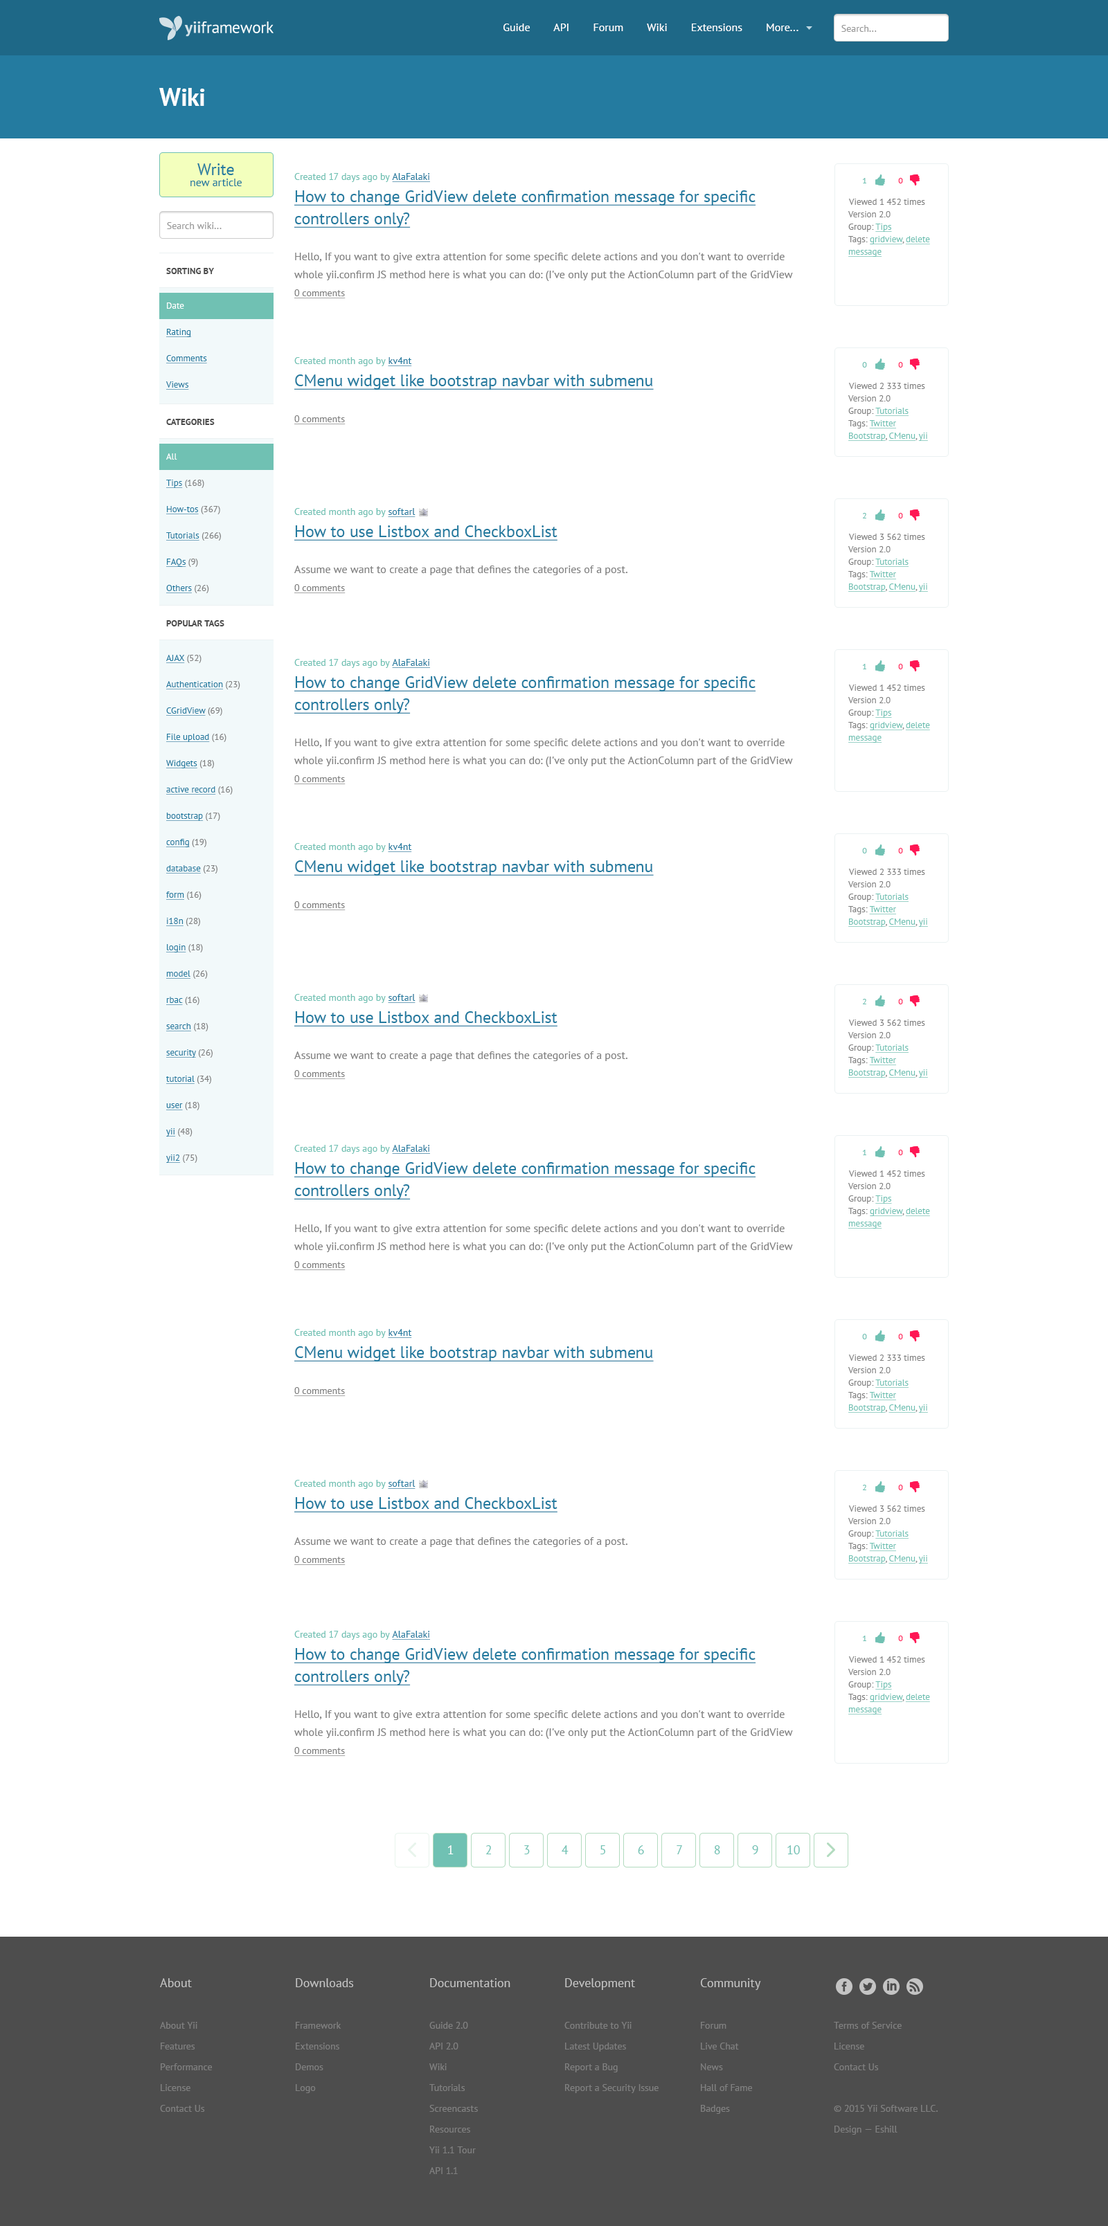
<style>
.page{position:relative;width:1108px;height:2226px;background:#ffffff}
.page>*{position:absolute;margin:0}
.t1{font:11.1px "PTSans-Regular";color:#ffffff}
.t2{font:9.7px "PTSans-Regular";color:#999999}
.t3{font:24.9px "PTSans-Bold";color:#ffffff}
.t4{font:11.1px/11.1px "PTSans-Regular";color:#247ba0}
.t5{font:16.6px/16.6px "PTSans-Regular";color:#247ba0}
.t6{font:11.1px/18px "PTSans-Regular";color:#808080}
.t7{font:9.7px/18px "PTSans-Regular";color:#70c1b3}
.t8{font:9.7px/18px "PTSans-Regular";color:#247ba0;text-decoration:underline}
.t9{font:16.6px/22.2px "PTSans-Regular";color:#247ba0;text-decoration:underline}
.t10{font:9.7px/18px "PTSans-Regular";color:#808080;text-decoration:underline}
.t11{font:8.3px "PTSans-Regular";color:#70c1b3}
.t12{font:8.3px "PTSans-Regular";color:#ff1654}
.t13{font:9px/12.5px "PTSans-Regular";color:#808080}
.t14{font:9px/12.5px "PTSans-Regular";color:#70c1b3;text-decoration:underline}
.t15{font:9px/26.3px "PTSans-Regular";color:#247ba0;text-decoration:underline}
.t16{font:9px/34.6px "PTSans-Bold";color:#4d4d4d;text-transform:uppercase}
.t17{font:9px/34.6px "PTSans-Regular";color:#ffffff}
.t18{font:9px/26.3px "PTSans-Regular";color:#808080}
.t19{font:9px/34.6px "PTSans-Regular";color:#247ba0;text-decoration:underline}
.t20{font:9px/34.6px "PTSans-Regular";color:#808080}
.t21{font:12.5px "PTSans-Regular";color:#ffffff}
.t22{font:12.5px "PTSans-Regular";color:#70c1b3}
.t23{font:9.7px/20.8px "PTSans-Regular";color:#808080}
.t24{font:12.5px/20.8px "PTSans-Regular";color:#c4c4c4}
</style>
<div class="page">
<p class="t1" style="left:503px;top:24px;width:295px;height:7px">Guide        API        Forum        Wiki        Extensions        More...</p>
<p class="t2" style="left:841px;top:25px;width:35px;height:7px">Search...</p>
<p class="t3" style="left:159px;top:88px;width:46px;height:18px">Wiki</p>
<p class="t4" style="left:190px;top:163px;width:52px;height:23px;text-align:center"><span class="t5">Write<br></span>new article</p>
<p class="t6" style="left:294px;top:173px;width:499px;height:125px"><span class="t7">Created 17 days ago by </span><span class="t8">AlaFalaki<br></span><span class="t9">How to change GridView delete confirmation message for specific controllers only?<br><br></span>Hello, If you want to give extra attention for some specific delete actions and you don't want to override whole yii.confirm JS method here is what you can do: (I've only put the ActionColumn part of the GridView<br><span class="t10">0 comments</span></p>
<p class="t11" style="left:863px;top:178px;width:3px;height:5px">1</p>
<p class="t12" style="left:898px;top:178px;width:5px;height:5px">0</p>
<p class="t13" style="left:847px;top:199px;width:83px;height:58px">Viewed 1 452 times <br>Version 2.0<br>Group: <span class="t14">Tips<br></span>Tags: <span class="t14">gridview</span>, <span class="t14">delete message</span></p>
<p class="t2" style="left:167px;top:222px;width:55px;height:7px">Search wiki...</p>
<p class="t15" style="left:165px;top:268px;width:49px;height:122px"><span class="t16">Sorting BY <br></span><span class="t17">Date<br></span>Rating<br>Comments<br>Views</p>
<p class="t9" style="left:294px;top:357px;width:360px;height:67px"><span class="t7">Created month ago by </span><span class="t8">kv4nt<br></span>CMenu widget like bootstrap navbar with submenu<br><br><span class="t10">0 comments</span></p>
<p class="t11" style="left:862px;top:362px;width:5px;height:6px">0</p>
<p class="t12" style="left:898px;top:362px;width:5px;height:6px">0</p>
<p class="t13" style="left:847px;top:383px;width:81px;height:58px">Viewed 2 333 times <br>Version 2.0<br>Group: <span class="t14">Tutorials<br></span>Tags: <span class="t14">Twitter Bootstrap</span>, <span class="t14">CMenu</span>, <span class="t14">yii</span></p>
<p class="t16" style="left:166px;top:419px;width:55px;height:174px">categories <br><span class="t17">All<br></span><span class="t15">Tips</span><span class="t18"> (168)<br></span><span class="t15">How-tos</span><span class="t18"> (367)<br></span><span class="t15">Tutorials</span><span class="t18"> (266)<br></span><span class="t15">FAQs</span><span class="t18"> (9)<br></span><span class="t15">Others</span><span class="t18"> (26)</span></p>
<p class="t6" style="left:294px;top:508px;width:333px;height:85px"><span class="t7">Created month ago by </span><span class="t8">softarl<br></span><span class="t9">How to use Listbox and CheckboxList<br><br></span>Assume we want to create a page that defines the categories of a post.<br><span class="t10">0 comments</span></p>
<p class="t11" style="left:862px;top:513px;width:4px;height:6px">2</p>
<p class="t12" style="left:898px;top:513px;width:5px;height:6px">0</p>
<p class="t13" style="left:847px;top:534px;width:81px;height:58px">Viewed 3 562 times <br>Version 2.0<br>Group: <span class="t14">Tutorials<br></span>Tags: <span class="t14">Twitter Bootstrap</span>, <span class="t14">CMenu</span>, <span class="t14">yii</span></p>
<p class="t15" style="left:166px;top:620px;width:74px;height:543px"><span class="t16">Popular Tags<br></span><span class="t19">AJAX</span><span class="t20"> (52)<br></span>Authentication<span class="t18"> (23)<br></span>CGridView<span class="t18"> (69)<br></span>File upload<span class="t18"> (16)<br></span>Widgets<span class="t18"> (18)<br></span>active record<span class="t18"> (16)<br></span>bootstrap<span class="t18"> (17)<br></span>config<span class="t18"> (19)<br></span>database<span class="t18"> (23)<br></span>form<span class="t18"> (16)<br></span>i18n<span class="t18"> (28)<br></span>login<span class="t18"> (18)<br></span>model<span class="t18"> (26)<br></span>rbac<span class="t18"> (16)<br></span>search<span class="t18"> (18)<br></span>security<span class="t18"> (26)<br></span>tutorial<span class="t18"> (34)<br></span>user<span class="t18"> (18)<br></span>yii<span class="t18"> (48)<br></span>yii2<span class="t18"> (75)</span></p>
<p class="t6" style="left:294px;top:659px;width:499px;height:125px"><span class="t7">Created 17 days ago by </span><span class="t8">AlaFalaki<br></span><span class="t9">How to change GridView delete confirmation message for specific controllers only?<br><br></span>Hello, If you want to give extra attention for some specific delete actions and you don't want to override whole yii.confirm JS method here is what you can do: (I've only put the ActionColumn part of the GridView<br><span class="t10">0 comments</span></p>
<p class="t11" style="left:863px;top:664px;width:3px;height:5px">1</p>
<p class="t12" style="left:898px;top:664px;width:5px;height:5px">0</p>
<p class="t13" style="left:847px;top:685px;width:83px;height:58px">Viewed 1 452 times <br>Version 2.0<br>Group: <span class="t14">Tips<br></span>Tags: <span class="t14">gridview</span>, <span class="t14">delete message</span></p>
<p class="t9" style="left:294px;top:843px;width:360px;height:67px"><span class="t7">Created month ago by </span><span class="t8">kv4nt<br></span>CMenu widget like bootstrap navbar with submenu<br><br><span class="t10">0 comments</span></p>
<p class="t11" style="left:862px;top:848px;width:5px;height:6px">0</p>
<p class="t12" style="left:898px;top:848px;width:5px;height:6px">0</p>
<p class="t13" style="left:847px;top:869px;width:81px;height:58px">Viewed 2 333 times <br>Version 2.0<br>Group: <span class="t14">Tutorials<br></span>Tags: <span class="t14">Twitter Bootstrap</span>, <span class="t14">CMenu</span>, <span class="t14">yii</span></p>
<p class="t6" style="left:294px;top:994px;width:333px;height:85px"><span class="t7">Created month ago by </span><span class="t8">softarl<br></span><span class="t9">How to use Listbox and CheckboxList<br><br></span>Assume we want to create a page that defines the categories of a post.<br><span class="t10">0 comments</span></p>
<p class="t11" style="left:862px;top:999px;width:4px;height:6px">2</p>
<p class="t12" style="left:898px;top:999px;width:5px;height:6px">0</p>
<p class="t13" style="left:847px;top:1020px;width:81px;height:58px">Viewed 3 562 times <br>Version 2.0<br>Group: <span class="t14">Tutorials<br></span>Tags: <span class="t14">Twitter Bootstrap</span>, <span class="t14">CMenu</span>, <span class="t14">yii</span></p>
<p class="t6" style="left:294px;top:1145px;width:499px;height:125px"><span class="t7">Created 17 days ago by </span><span class="t8">AlaFalaki<br></span><span class="t9">How to change GridView delete confirmation message for specific controllers only?<br><br></span>Hello, If you want to give extra attention for some specific delete actions and you don't want to override whole yii.confirm JS method here is what you can do: (I've only put the ActionColumn part of the GridView<br><span class="t10">0 comments</span></p>
<p class="t11" style="left:863px;top:1150px;width:3px;height:5px">1</p>
<p class="t12" style="left:898px;top:1150px;width:5px;height:5px">0</p>
<p class="t13" style="left:847px;top:1171px;width:83px;height:58px">Viewed 1 452 times <br>Version 2.0<br>Group: <span class="t14">Tips<br></span>Tags: <span class="t14">gridview</span>, <span class="t14">delete message</span></p>
<p class="t9" style="left:294px;top:1329px;width:360px;height:67px"><span class="t7">Created month ago by </span><span class="t8">kv4nt<br></span>CMenu widget like bootstrap navbar with submenu<br><br><span class="t10">0 comments</span></p>
<p class="t11" style="left:862px;top:1334px;width:5px;height:6px">0</p>
<p class="t12" style="left:898px;top:1334px;width:5px;height:6px">0</p>
<p class="t13" style="left:847px;top:1355px;width:81px;height:58px">Viewed 2 333 times <br>Version 2.0<br>Group: <span class="t14">Tutorials<br></span>Tags: <span class="t14">Twitter Bootstrap</span>, <span class="t14">CMenu</span>, <span class="t14">yii</span></p>
<p class="t6" style="left:294px;top:1480px;width:333px;height:85px"><span class="t7">Created month ago by </span><span class="t8">softarl<br></span><span class="t9">How to use Listbox and CheckboxList<br><br></span>Assume we want to create a page that defines the categories of a post.<br><span class="t10">0 comments</span></p>
<p class="t11" style="left:862px;top:1485px;width:4px;height:6px">2</p>
<p class="t12" style="left:898px;top:1485px;width:5px;height:6px">0</p>
<p class="t13" style="left:847px;top:1506px;width:81px;height:58px">Viewed 3 562 times <br>Version 2.0<br>Group: <span class="t14">Tutorials<br></span>Tags: <span class="t14">Twitter Bootstrap</span>, <span class="t14">CMenu</span>, <span class="t14">yii</span></p>
<p class="t6" style="left:294px;top:1631px;width:499px;height:125px"><span class="t7">Created 17 days ago by </span><span class="t8">AlaFalaki<br></span><span class="t9">How to change GridView delete confirmation message for specific controllers only?<br><br></span>Hello, If you want to give extra attention for some specific delete actions and you don't want to override whole yii.confirm JS method here is what you can do: (I've only put the ActionColumn part of the GridView<br><span class="t10">0 comments</span></p>
<p class="t11" style="left:863px;top:1636px;width:3px;height:5px">1</p>
<p class="t12" style="left:898px;top:1636px;width:5px;height:5px">0</p>
<p class="t13" style="left:847px;top:1657px;width:83px;height:58px">Viewed 1 452 times <br>Version 2.0<br>Group: <span class="t14">Tips<br></span>Tags: <span class="t14">gridview</span>, <span class="t14">delete message</span></p>
<p class="t21" style="left:448px;top:1846px;width:5px;height:9px">1</p>
<p class="t22" style="left:485px;top:1846px;width:7px;height:9px">2</p>
<p class="t22" style="left:524px;top:1846px;width:6px;height:9px">3</p>
<p class="t22" style="left:561px;top:1846px;width:7px;height:9px">4</p>
<p class="t22" style="left:600px;top:1846px;width:5px;height:9px">5</p>
<p class="t22" style="left:638px;top:1846px;width:6px;height:9px">6</p>
<p class="t22" style="left:676px;top:1846px;width:6px;height:9px">7</p>
<p class="t22" style="left:714px;top:1846px;width:6px;height:9px">8</p>
<p class="t22" style="left:752px;top:1846px;width:6px;height:9px">9</p>
<p class="t22" style="left:787px;top:1846px;width:13px;height:9px">10</p>
<p class="t23" style="left:160px;top:1979px;width:52px;height:133px"><span class="t24">About<br></span><br>About Yii<br>Features<br>Performance<br>License<br>Contact Us</p>
<p class="t23" style="left:296px;top:1979px;width:58px;height:115px"><span class="t24">Downloads<br></span><br>Framework<br>Extensions<br>Demos<br>Logo</p>
<p class="t23" style="left:429px;top:1979px;width:81px;height:196px"><span class="t24">Documentation<br></span><br>Guide 2.0<br>API 2.0<br>Wiki<br>Tutorials<br>Screencasts<br>Resources<br>Yii 1.1 Tour<br>API 1.1</p>
<p class="t23" style="left:564px;top:1979px;width:94px;height:115px"><span class="t24">Development<br></span><br>Contribute to Yii<br>Latest Updates<br>Report a Bug<br>Report a Security Issue</p>
<p class="t23" style="left:700px;top:1979px;width:61px;height:135px"><span class="t24">Community<br></span><br>Forum<br>Live Chat<br>News<br>Hall of Fame<br>Badges</p>
<p class="t23" style="left:834px;top:2022px;width:103px;height:113px">Terms of Service<br>License<br>Contact Us<br><br>© 2015 Yii Software LLC. Design — Eshill</p>
</div>
